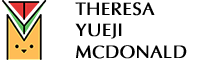
<style>
.page{position:relative;width:208px;height:60px;background:#ffffff}
.page>*{position:absolute;margin:0}
.t1{font:18px "Optima-Bold";color:#000000}
</style>
<div class="page">
<p class="t1" style="left:75px;top:2px;width:112px;height:57px">THERESA<br>YUEJI<br>MCDONALD</p>
</div>
